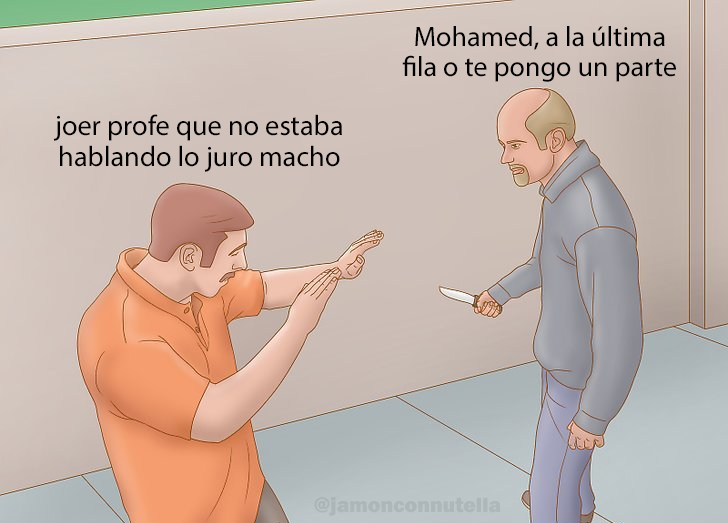
<style>
.page{position:relative;width:728px;height:523px}
.page>*{position:absolute;margin:0}
.t1{font:28.1px "MyriadPro-Regular";color:#000000}
.t2{font:28.4px "MyriadPro-Regular";color:#000000}
.t3{font:21.5px "FranklinGothic-Heavy";color:#adb6b8}
</style>
<div class="page">
<p class="t1" style="left:402px;top:26px;width:274px;height:56px;text-align:center">Mohamed, a la última<br>fila o te pongo un parte</p>
<p class="t2" style="left:53px;top:114px;width:289px;height:58px;text-align:center">joer profe que no estaba<br>hablando lo juro macho</p>
<p class="t3" style="left:314px;top:497px;width:187px;height:19px">@jamonconnutella</p>
</div>
